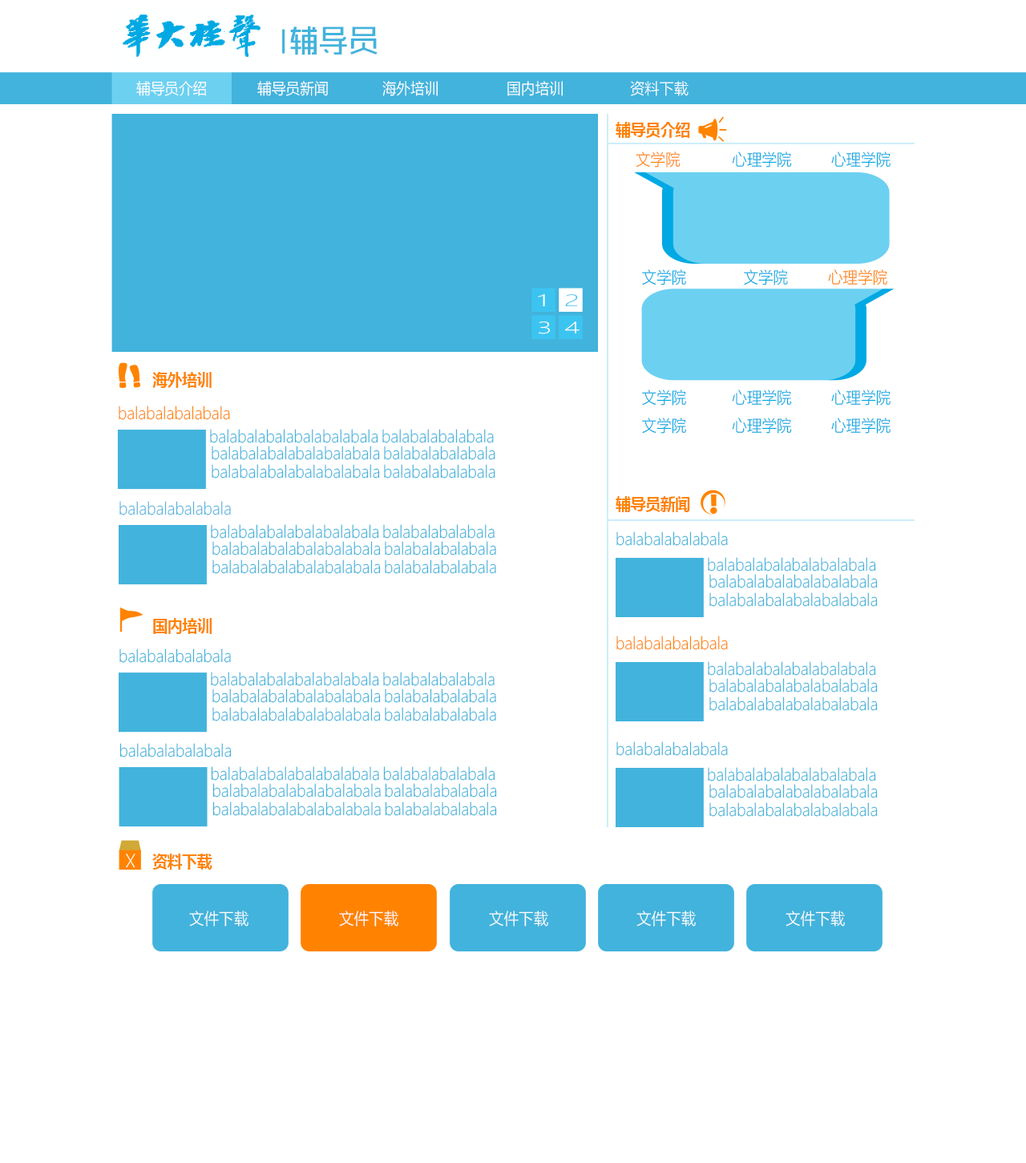
<style>
.page{position:relative;width:1026px;height:1163px;background:#ffffff}
.page>*{position:absolute;margin:0}
.t1{font:32.2px "RTWSShangGoG0v1-Condensed";color:#42b3dc;scale:1.25 1}
.t2{font:15.5px "MicrosoftYaHeiLight";color:#ffffff;scale:0.91 1}
.t3{font:15.5px "MicrosoftYaHeiLight";color:#ffffff;scale:0.92 1}
.t4{font:15.5px "MicrosoftYaHeiLight";color:#ffffff;scale:0.94 1}
.t5{font:16.3px "MicrosoftYaHei-Bold";color:#ff8300;scale:0.91 1}
.t6{font:16.3px "MicrosoftYaHeiLight";color:#ff8300;scale:0.91 1}
.t7{font:16.3px "MicrosoftYaHeiLight";color:#00a9e3;scale:0.91 1}
.t8{font:15.5px "MicrosoftYaHeiLight";color:#ffffff;scale:1.76 1}
.t9{font:15.5px "MicrosoftYaHeiLight";color:#3cc4f1;scale:1.76 1}
.t10{font:16.3px "MicrosoftYaHeiLight";color:#42b3dc;scale:0.91 1}
.t11{font:16.3px "MicrosoftYaHeiLight";color:#58b3dc;scale:0.91 1}
.t12{font:16.3px "MicrosoftYaHeiLight";color:#ffffff;scale:0.91 1}
</style>
<div class="page">
<p class="t1" style="left:290px;top:26px;width:87px;height:29px">辅导员</p>
<p class="t2" style="left:136px;top:81px;width:70px;height:15px">辅导员介绍</p>
<p class="t3" style="left:257px;top:81px;width:71px;height:15px">辅导员新闻</p>
<p class="t2" style="left:382px;top:81px;width:55px;height:15px">海外培训</p>
<p class="t3" style="left:507px;top:81px;width:55px;height:15px">国内培训</p>
<p class="t4" style="left:630px;top:81px;width:58px;height:15px">资料下载</p>
<p class="t5" style="left:615px;top:122px;width:75px;height:16px">辅导员介绍</p>
<p class="t6" style="left:635px;top:151px;width:45px;height:16px">文学院</p>
<p class="t7" style="left:732px;top:151px;width:60px;height:16px">心理学院</p>
<p class="t7" style="left:831px;top:151px;width:59px;height:16px">心理学院</p>
<p class="t7" style="left:642px;top:269px;width:44px;height:16px">文学院</p>
<p class="t7" style="left:744px;top:269px;width:44px;height:16px">文学院</p>
<p class="t6" style="left:828px;top:269px;width:59px;height:16px">心理学院</p>
<p class="t8" style="left:538px;top:294px;width:7px;height:13px">1</p>
<p class="t9" style="left:565px;top:294px;width:13px;height:13px">2</p>
<p class="t8" style="left:538px;top:321px;width:12px;height:13px">3</p>
<p class="t8" style="left:565px;top:321px;width:14px;height:12px">4</p>
<p class="t5" style="left:152px;top:372px;width:60px;height:16px">海外培训</p>
<p class="t7" style="left:642px;top:389px;width:44px;height:16px">文学院</p>
<p class="t7" style="left:732px;top:389px;width:60px;height:16px">心理学院</p>
<p class="t7" style="left:831px;top:389px;width:59px;height:16px">心理学院</p>
<p class="t6" style="left:119px;top:405px;width:111px;height:15px">balabalabalabala</p>
<p class="t7" style="left:642px;top:417px;width:44px;height:16px">文学院</p>
<p class="t7" style="left:732px;top:417px;width:60px;height:16px">心理学院</p>
<p class="t7" style="left:831px;top:417px;width:59px;height:16px">心理学院</p>
<p class="t10" style="left:210px;top:429px;width:111px;height:14px">balabalabalabala</p>
<p class="t10" style="left:323px;top:429px;width:55px;height:14px">balabala</p>
<p class="t10" style="left:382px;top:429px;width:112px;height:14px">balabalabalabala</p>
<p class="t10" style="left:212px;top:446px;width:111px;height:14px">balabalabalabala</p>
<p class="t10" style="left:325px;top:446px;width:55px;height:14px">balabala</p>
<p class="t10" style="left:384px;top:446px;width:111px;height:14px">balabalabalabala</p>
<p class="t10" style="left:212px;top:464px;width:111px;height:14px">balabalabalabala</p>
<p class="t10" style="left:325px;top:464px;width:55px;height:14px">balabala</p>
<p class="t10" style="left:384px;top:464px;width:111px;height:14px">balabalabalabala</p>
<p class="t5" style="left:615px;top:496px;width:75px;height:16px">辅导员新闻</p>
<p class="t11" style="left:119px;top:501px;width:112px;height:14px">balabalabalabala</p>
<p class="t10" style="left:211px;top:524px;width:111px;height:14px">balabalabalabala</p>
<p class="t10" style="left:324px;top:524px;width:55px;height:14px">balabala</p>
<p class="t10" style="left:383px;top:524px;width:111px;height:14px">balabalabalabala</p>
<p class="t10" style="left:616px;top:531px;width:112px;height:15px">balabalabalabala</p>
<p class="t10" style="left:212px;top:541px;width:112px;height:14px">balabalabalabala</p>
<p class="t10" style="left:325px;top:541px;width:56px;height:14px">balabala</p>
<p class="t10" style="left:385px;top:541px;width:111px;height:14px">balabalabalabala</p>
<p class="t10" style="left:708px;top:557px;width:111px;height:14px">balabalabalabala</p>
<p class="t10" style="left:820px;top:557px;width:56px;height:14px">balabala</p>
<p class="t10" style="left:212px;top:559px;width:112px;height:15px">balabalabalabala</p>
<p class="t10" style="left:325px;top:559px;width:56px;height:15px">balabala</p>
<p class="t10" style="left:385px;top:559px;width:111px;height:15px">balabalabalabala</p>
<p class="t10" style="left:709px;top:574px;width:111px;height:14px">balabalabalabala</p>
<p class="t10" style="left:822px;top:574px;width:55px;height:14px">balabala</p>
<p class="t10" style="left:709px;top:592px;width:111px;height:15px">balabalabalabala</p>
<p class="t10" style="left:822px;top:592px;width:55px;height:15px">balabala</p>
<p class="t5" style="left:153px;top:618px;width:59px;height:16px">国内培训</p>
<p class="t6" style="left:616px;top:635px;width:112px;height:15px">balabalabalabala</p>
<p class="t10" style="left:119px;top:648px;width:112px;height:15px">balabalabalabala</p>
<p class="t10" style="left:708px;top:661px;width:111px;height:14px">balabalabalabala</p>
<p class="t10" style="left:820px;top:661px;width:56px;height:14px">balabala</p>
<p class="t10" style="left:211px;top:671px;width:111px;height:15px">balabalabalabala</p>
<p class="t10" style="left:324px;top:671px;width:55px;height:15px">balabala</p>
<p class="t10" style="left:383px;top:671px;width:111px;height:15px">balabalabalabala</p>
<p class="t10" style="left:709px;top:678px;width:111px;height:14px">balabalabalabala</p>
<p class="t10" style="left:822px;top:678px;width:55px;height:14px">balabala</p>
<p class="t10" style="left:212px;top:688px;width:112px;height:15px">balabalabalabala</p>
<p class="t10" style="left:325px;top:688px;width:56px;height:15px">balabala</p>
<p class="t10" style="left:385px;top:688px;width:111px;height:15px">balabalabalabala</p>
<p class="t10" style="left:709px;top:696px;width:111px;height:15px">balabalabalabala</p>
<p class="t10" style="left:822px;top:696px;width:55px;height:15px">balabala</p>
<p class="t10" style="left:212px;top:707px;width:112px;height:14px">balabalabalabala</p>
<p class="t10" style="left:325px;top:707px;width:56px;height:14px">balabala</p>
<p class="t10" style="left:385px;top:707px;width:111px;height:14px">balabalabalabala</p>
<p class="t10" style="left:119px;top:743px;width:113px;height:14px">balabalabalabala</p>
<p class="t10" style="left:616px;top:741px;width:112px;height:15px">balabalabalabala</p>
<p class="t10" style="left:211px;top:766px;width:112px;height:14px">balabalabalabala</p>
<p class="t10" style="left:324px;top:766px;width:55px;height:14px">balabala</p>
<p class="t10" style="left:383px;top:766px;width:112px;height:14px">balabalabalabala</p>
<p class="t10" style="left:708px;top:767px;width:111px;height:14px">balabalabalabala</p>
<p class="t10" style="left:820px;top:767px;width:56px;height:14px">balabala</p>
<p class="t10" style="left:212px;top:783px;width:113px;height:14px">balabalabalabala</p>
<p class="t10" style="left:325px;top:783px;width:56px;height:14px">balabala</p>
<p class="t10" style="left:385px;top:783px;width:112px;height:14px">balabalabalabala</p>
<p class="t10" style="left:709px;top:784px;width:111px;height:14px">balabalabalabala</p>
<p class="t10" style="left:822px;top:784px;width:55px;height:14px">balabala</p>
<p class="t10" style="left:212px;top:801px;width:113px;height:15px">balabalabalabala</p>
<p class="t10" style="left:325px;top:801px;width:56px;height:15px">balabala</p>
<p class="t10" style="left:385px;top:801px;width:112px;height:15px">balabalabalabala</p>
<p class="t10" style="left:709px;top:802px;width:111px;height:14px">balabalabalabala</p>
<p class="t10" style="left:822px;top:802px;width:55px;height:14px">balabala</p>
<p class="t5" style="left:152px;top:853px;width:60px;height:16px">资料下载</p>
<p class="t12" style="left:189px;top:910px;width:59px;height:16px">文件下载</p>
<p class="t12" style="left:339px;top:910px;width:59px;height:16px">文件下载</p>
<p class="t12" style="left:489px;top:910px;width:59px;height:16px">文件下载</p>
<p class="t12" style="left:636px;top:910px;width:60px;height:16px">文件下载</p>
<p class="t12" style="left:785px;top:910px;width:60px;height:16px">文件下载</p>
</div>
